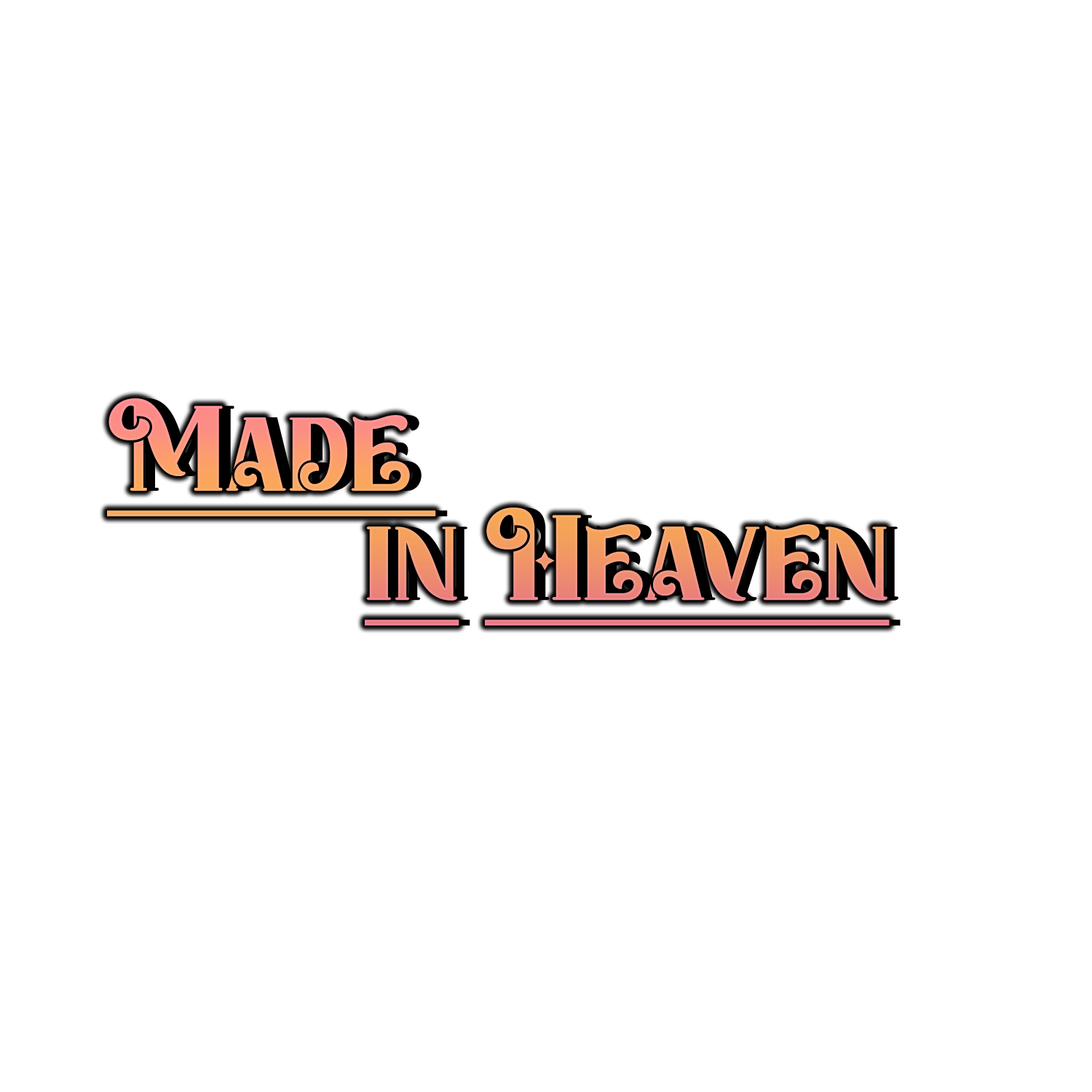
<style>
.page{position:relative;width:1092px;height:1092px;background:#ffffff}
.page>*{position:absolute;margin:0}
.t1{font:118.3px "HomeChristmas-Regular";color:#fc9e76;text-decoration:underline}
.t2{font:118.3px "HomeChristmas-Regular";text-decoration:underline}
</style>
<div class="page">
<p class="t1" style="left:107px;top:398px;width:329px;height:119px">Made</p>
<p class="t2" style="left:119px;top:398px;width:329px;height:119px">Made</p>
<p class="t2" style="left:485px;top:507px;width:405px;height:119px">Heaven</p>
<p class="t2" style="left:496px;top:507px;width:405px;height:119px">Heaven</p>
<p class="t2" style="left:365px;top:526px;width:94px;height:100px">in</p>
<p class="t2" style="left:376px;top:526px;width:94px;height:100px">in</p>
</div>
